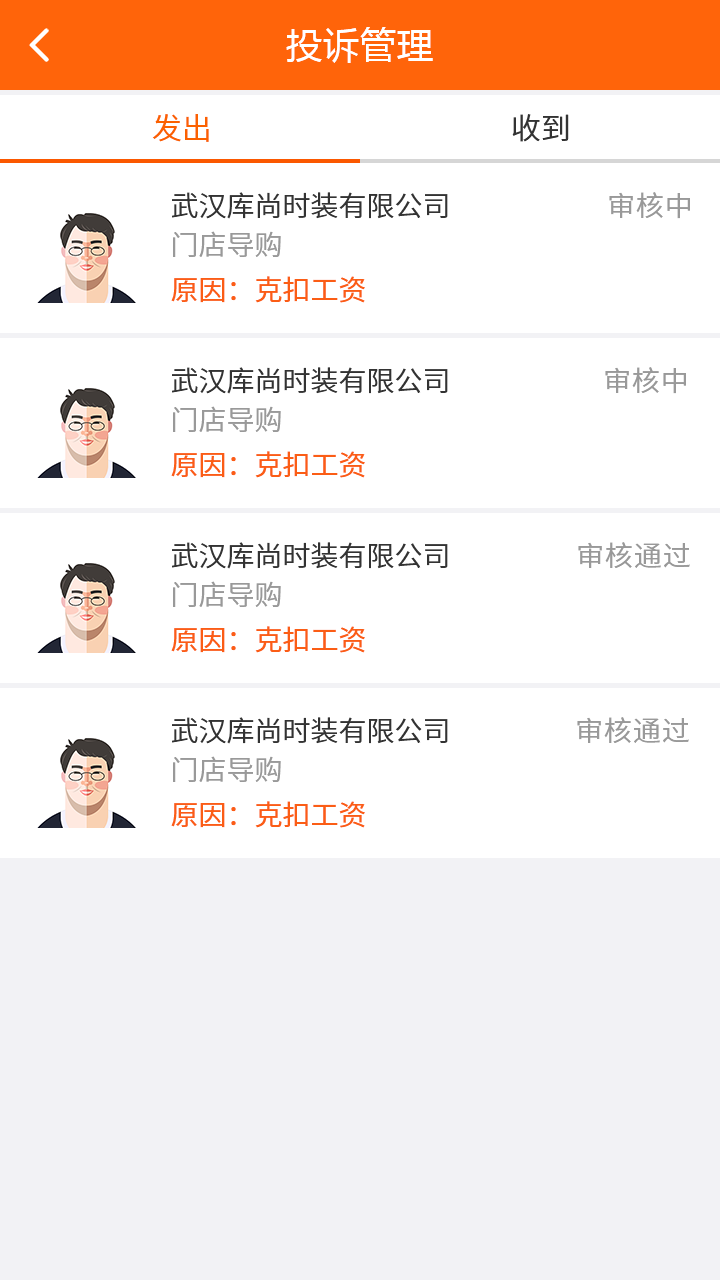
<style>
.page{position:relative;width:720px;height:1280px;background:#ffffff}
.page>*{position:absolute;margin:0}
.t1{font:36px "MicrosoftYaHei";letter-spacing:0.03em;color:#ffffff}
.t2{font:30px "NotoSansCJKsc-DemiLight";color:#fb6100;font-variant:small-caps}
.t3{font:30px "NotoSansCJKsc-DemiLight";color:#333333;font-variant:small-caps}
.t4{font:28px "NotoSansCJKsc-DemiLight";color:#333333;font-variant:small-caps}
.t5{font:28px "NotoSansCJKsc-DemiLight";letter-spacing:0.03em;color:#999999;font-variant:small-caps}
.t6{font:28px "NotoSansCJKsc-DemiLight";color:#999999;font-variant:small-caps}
.t7{font:28px "NotoSansCJKsc-Regular";color:#fb5d15;font-variant:small-caps}
</style>
<div class="page">
<p class="t1" style="left:286px;top:27px;width:147px;height:36px">投诉管理</p>
<p class="t2" style="left:152px;top:114px;width:57px;height:28px">发出</p>
<p class="t3" style="left:512px;top:114px;width:57px;height:28px">收到</p>
<p class="t4" style="left:172px;top:192px;width:276px;height:27px">武汉库尚时装有限公司</p>
<p class="t5" style="left:609px;top:192px;width:81px;height:27px">审核中</p>
<p class="t6" style="left:173px;top:231px;width:108px;height:26px">门店导购</p>
<p class="t7" style="left:171px;top:276px;width:194px;height:27px">原因：克扣工资</p>
<p class="t4" style="left:172px;top:367px;width:276px;height:27px">武汉库尚时装有限公司</p>
<p class="t5" style="left:605px;top:367px;width:81px;height:27px">审核中</p>
<p class="t6" style="left:173px;top:406px;width:108px;height:26px">门店导购</p>
<p class="t7" style="left:171px;top:451px;width:194px;height:27px">原因：克扣工资</p>
<p class="t4" style="left:172px;top:542px;width:276px;height:27px">武汉库尚时装有限公司</p>
<p class="t5" style="left:578px;top:542px;width:112px;height:26px">审核通过</p>
<p class="t6" style="left:173px;top:581px;width:108px;height:26px">门店导购</p>
<p class="t7" style="left:171px;top:626px;width:194px;height:27px">原因：克扣工资</p>
<p class="t4" style="left:172px;top:717px;width:276px;height:27px">武汉库尚时装有限公司</p>
<p class="t5" style="left:577px;top:717px;width:112px;height:26px">审核通过</p>
<p class="t6" style="left:173px;top:756px;width:108px;height:26px">门店导购</p>
<p class="t7" style="left:171px;top:801px;width:194px;height:27px">原因：克扣工资</p>
</div>
